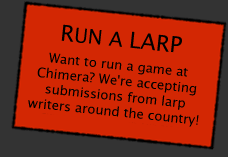
<style>
.page{position:relative;width:228px;height:157px;background:#d32703}
.page>*{position:absolute;margin:0}
.t1{font:13px "LucidaSansUnicode";color:#000000}
.t2{font:22px "LucidaSansUnicode";color:#000000}
.t3{font:20px "LucidaSansUnicode";color:#000000}
</style>
<div class="page">
<p class="t1" style="left:28px;top:24px;width:171px;height:103px;text-align:center;rotate:6deg"><span class="t2">R</span><span class="t3">UN A </span><span class="t2">LARP<br><br></span>Want to run a game at <br>Chimera? We're accepting <br>submissions from larp <br>writers around the country!</p>
</div>
